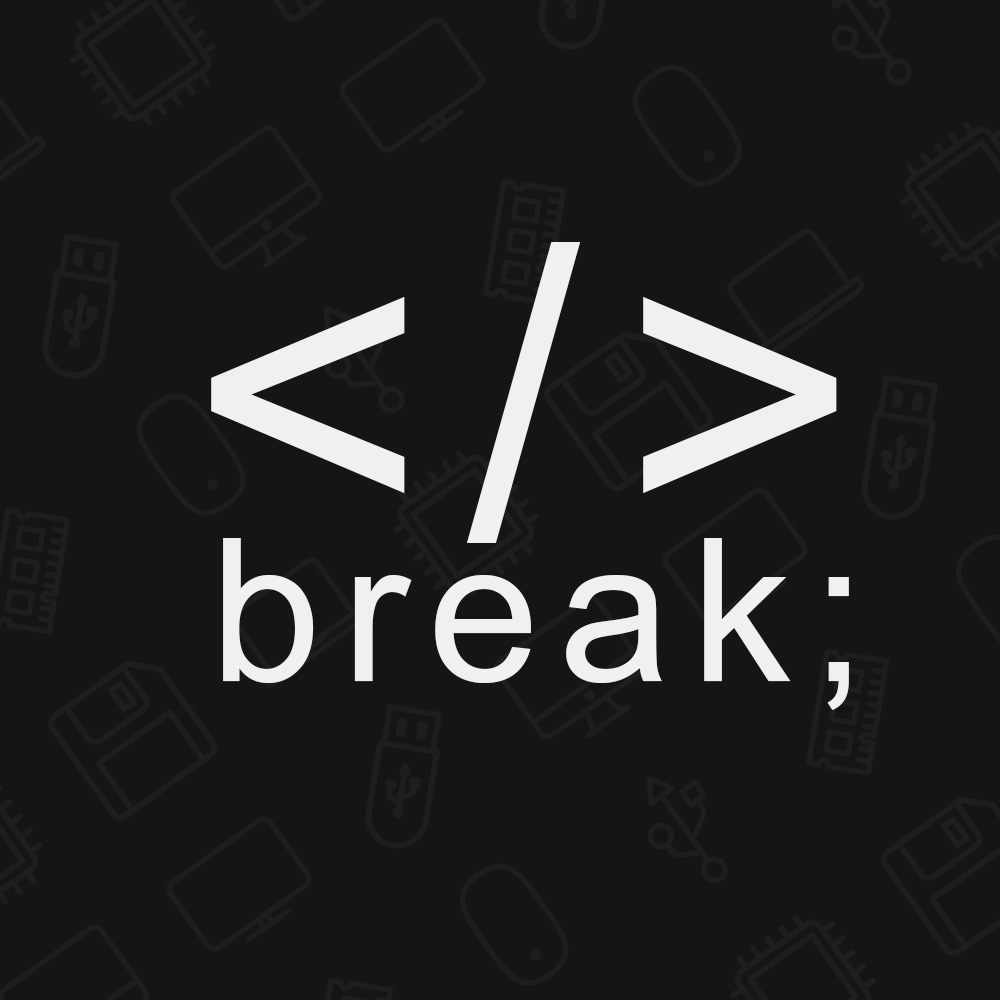
<style>
.page{position:relative;width:1000px;height:1000px;background:#151515}
.page>*{position:absolute;margin:0}
.t1{font:406.9px "ArialMT";letter-spacing:0.1em;color:#f0f0f0}
.t2{font:200px "ArialMT";letter-spacing:0.1em;color:#f0f0f0}
</style>
<div class="page">
<p class="t1" style="left:211px;top:242px;width:626px;height:301px">&lt;/&gt;</p>
<p class="t2" style="left:223px;top:538px;width:626px;height:172px">break;</p>
</div>
